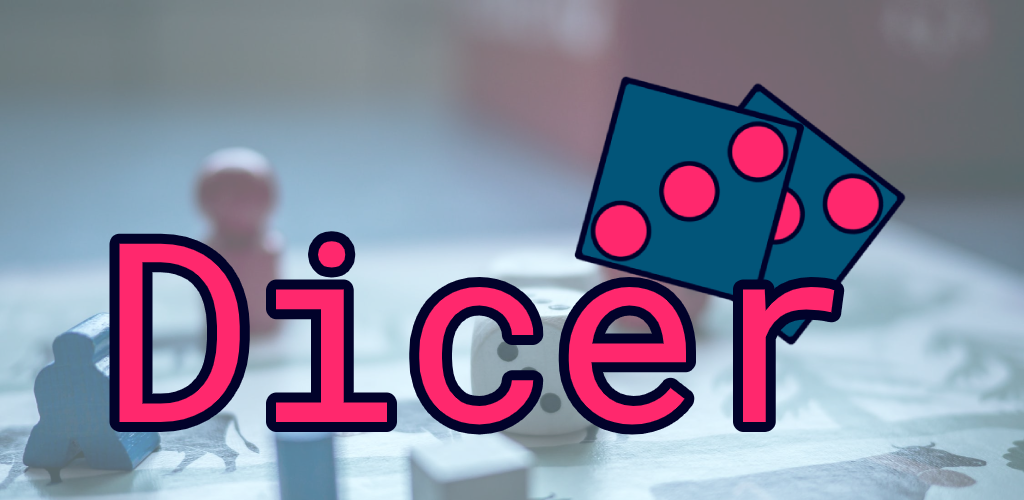
<style>
.page{position:relative;width:1024px;height:500px}
.page>*{position:absolute;margin:0}
.t1{font:250.9px "RobotoMono-Regular";color:#ff286d}
</style>
<div class="page">
<p class="t1" style="left:119px;top:241px;width:716px;height:184px">Dicer</p>
</div>
